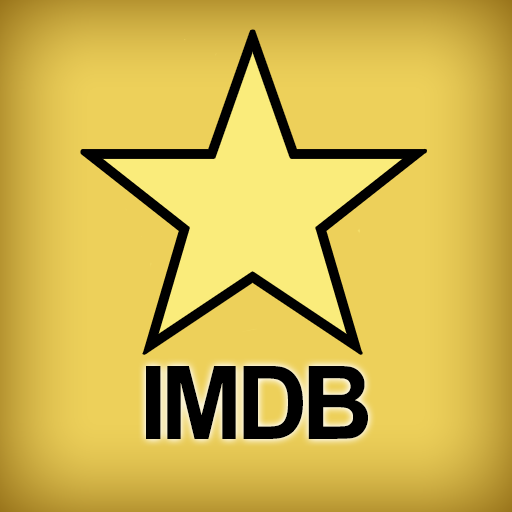
<style>
.page{position:relative;width:512px;height:512px;background:#edd05a}
.page>*{position:absolute;margin:0}
.t1{font:101.6px "Arial-BoldMT";letter-spacing:-0.06em;color:#000000;font-variant:small-caps;scale:0.97 1}
</style>
<div class="page">
<p class="t1" style="left:146px;top:366px;width:222px;height:73px">IMDB</p>
</div>
